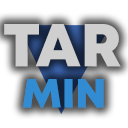
<style>
.page{position:relative;width:128px;height:128px;background:#ffffff}
.page>*{position:absolute;margin:0}
.t1{font:60.3px "Mont-HeavyDEMO";color:#cfcfcf}
.t2{font:40.8px "Mont-HeavyDEMO";color:#318cd3}
</style>
<div class="page">
<p class="t1" style="left:4px;top:24px;width:117px;height:43px">TAR</p>
<p class="t2" style="left:23px;top:79px;width:81px;height:29px">MIN</p>
</div>
